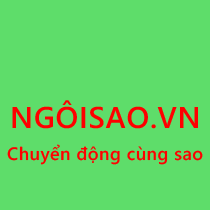
<style>
.page{position:relative;width:210px;height:210px;background:#5edd6a}
.page>*{position:absolute;margin:0}
.t1{font:30px "SegoeWP-Semibold";letter-spacing:0.025em;color:#ff0101}
.t2{font:18px "SegoeWP-Semibold";letter-spacing:0.025em;color:#ff0000}
</style>
<div class="page">
<p class="t1" style="left:12px;top:100px;width:186px;height:29px">NGÔISAO.VN</p>
<p class="t2" style="left:7px;top:144px;width:196px;height:21px">Chuyển động cùng sao</p>
</div>
